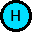
<style>
.page{position:relative;width:32px;height:32px;background:#00deff}
.page>*{position:absolute;margin:0}
.t1{font:18px "Calibri";color:#000000}
</style>
<div class="page">
<p class="t1" style="left:11px;top:10px;width:9px;height:11px">H</p>
</div>
